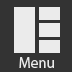
<style>
.page{position:relative;width:72px;height:72px;background:#333333}
.page>*{position:absolute;margin:0}
.t1{font:15px "MyriadPro-Regular";color:#ffffff}
</style>
<div class="page">
<p class="t1" style="left:19px;top:57px;width:35px;height:11px">Menu</p>
</div>
